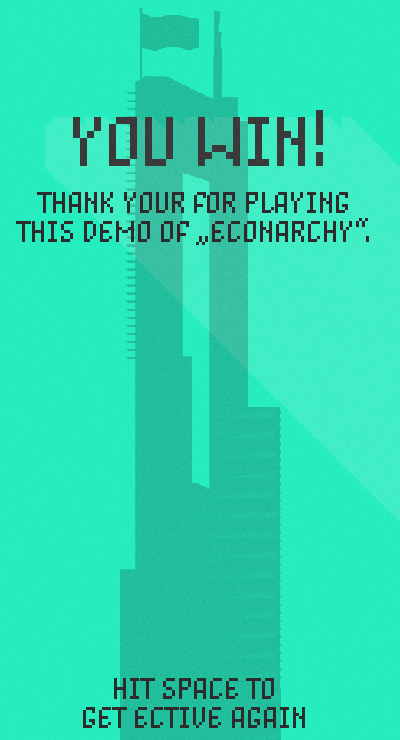
<style>
.page{position:relative;width:400px;height:740px}
.page>*{position:absolute;margin:0}
.t1{font:56px "Unibody8Pro-RegularItalic";letter-spacing:-0.085em;color:#3a3a3a;text-transform:uppercase}
.t2{font:24px "Unibody8Pro-RegularItalic";letter-spacing:-0.085em;color:#2d2c2c;text-transform:uppercase}
</style>
<div class="page">
<p class="t1" style="left:73px;top:110px;width:257px;height:56px">YOU WIN!</p>
<p class="t2" style="left:16px;top:192px;width:353px;height:53px;text-align:center">THANK YOUR FOR PLAYING<br>THIS DEMO OF „ECONARCHY“.</p>
<p class="t2" style="left:83px;top:678px;width:222px;height:50px;text-align:center">HIT SPACE TO<br>GET ECTIVE again</p>
</div>
